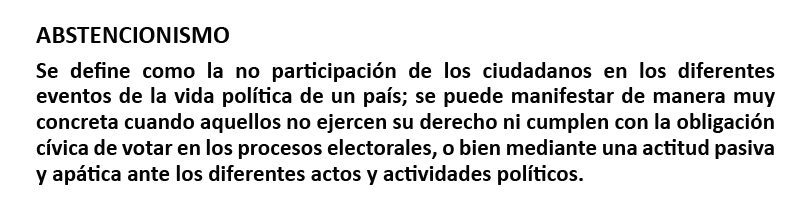
<style>
.page{position:relative;width:800px;height:209px;background:#ffffff}
.page>*{position:absolute;margin:0}
.t1{font:25px "Calibri-Bold";letter-spacing:0.005em;color:#040404}
.t2{font:22.9px/25.7px "Calibri-Bold";letter-spacing:0.005em;color:#040404}
</style>
<div class="page">
<p class="t1" style="left:36px;top:27px;width:193px;height:16px">ABSTENCIONISMO</p>
<p class="t2" style="left:36px;top:62px;width:739px;height:123px;text-align:justify">Se define como la no participación de los ciudadanos en los diferentes        eventos de la vida política de un país; se puede manifestar de manera muy concreta cuando aquellos no ejercen su derecho ni cumplen con la obligación cívica de votar en los procesos electorales, o bien mediante una actitud pasiva y apática ante los diferentes actos y actividades políticos.</p>
</div>
